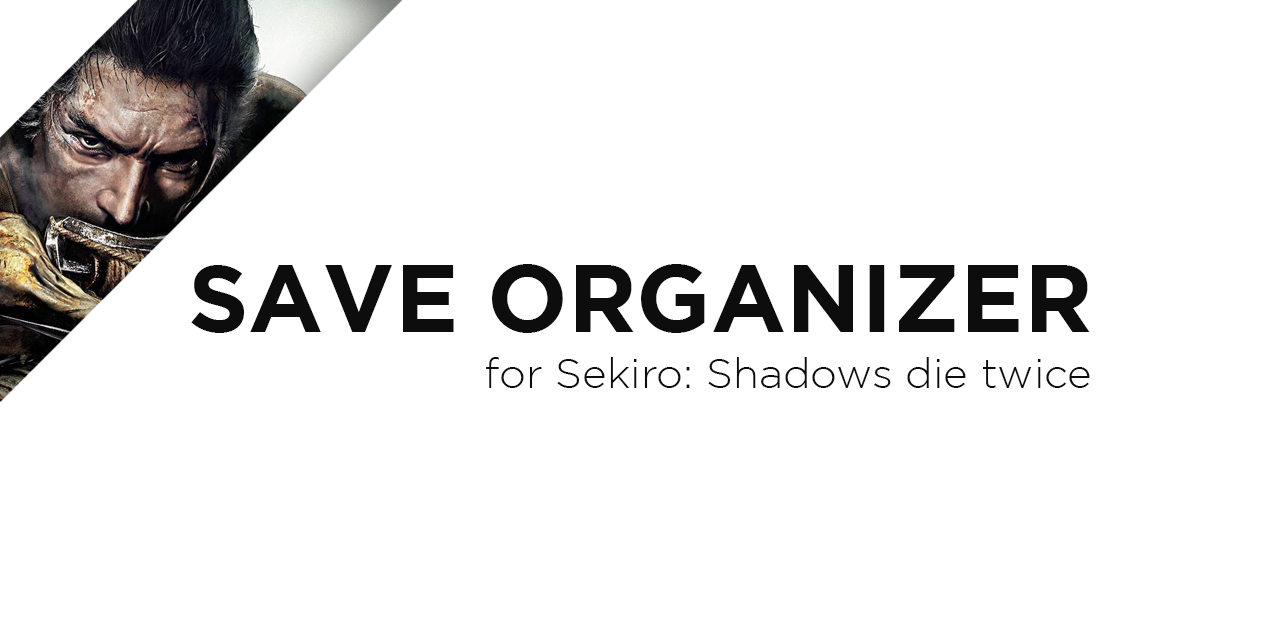
<style>
.page{position:relative;width:1280px;height:641px;background:#ffffff}
.page>*{position:absolute;margin:0}
.t1{font:95px "Gotham-Bold";color:#0d0d0d}
.t2{font:42px "Gotham-Light";color:#0d0d0d}
</style>
<div class="page">
<p class="t1" style="left:191px;top:264px;width:899px;height:69px">SAVE ORGANIZER</p>
<p class="t2" style="left:486px;top:357px;width:604px;height:31px">for Sekiro: Shadows die twice</p>
</div>
